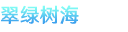
<style>
.page{position:relative;width:128px;height:32px;background:#ffffff}
.page>*{position:absolute;margin:0}
.t1{font:20px "HYWenHei-FEW";letter-spacing:0.025em;scale:0.97 1}
</style>
<div class="page">
<p class="t1" style="left:1px;top:5px;width:78px;height:19px">翠绿树海</p>
</div>
